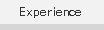
<style>
.page{position:relative;width:104px;height:30px;background:#f2f2f2}
.page>*{position:absolute;margin:0}
.t1{font:12px "SHeadG";color:#333333;scale:0.95 1}
</style>
<div class="page">
<p class="t1" style="left:20px;top:7px;width:61px;height:11px">Experience</p>
</div>
